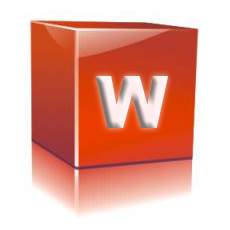
<style>
.page{position:relative;width:230px;height:230px;background:#ffffff}
.page>*{position:absolute;margin:0}
.t1{font:72px "Arial-Black";color:#ffeded}
</style>
<div class="page">
<p class="t1" style="left:96px;top:76px;width:72px;height:52px">W</p>
</div>
